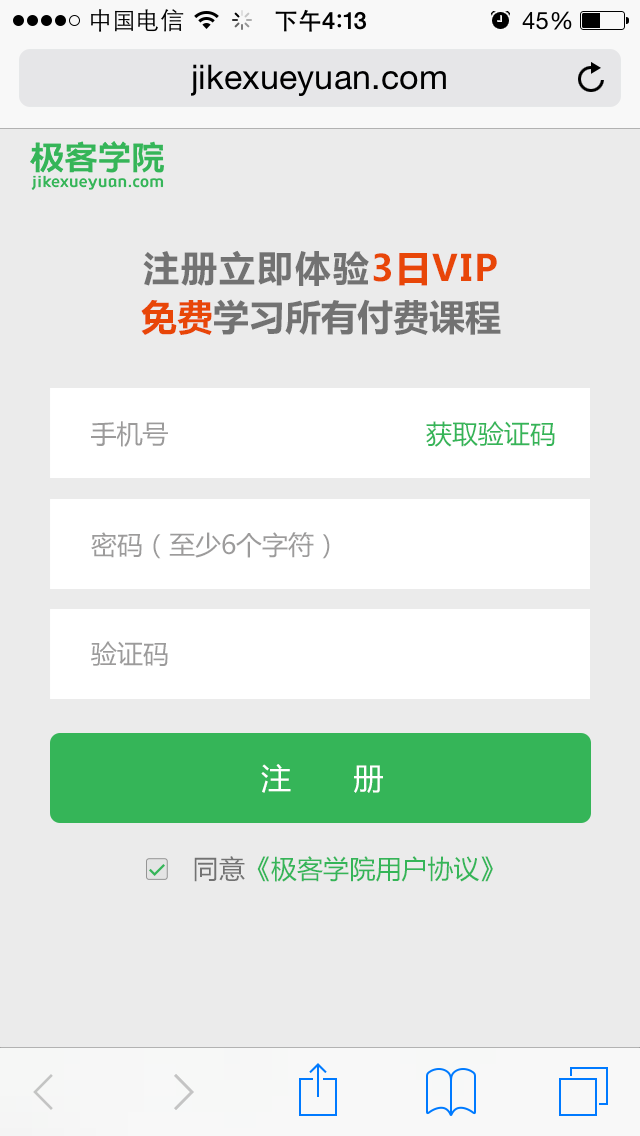
<style>
.page{position:relative;width:640px;height:1136px;background:#ebebeb}
.page>*{position:absolute;margin:0}
.t1{font:36px/49px "MicrosoftYaHei-Bold";color:#727272}
.t2{font:36px/49px "MicrosoftYaHei-Bold";letter-spacing:0.051em;color:#727272}
.t3{font:36px/49px "MicrosoftYaHei-Bold";letter-spacing:0.051em;color:#e84608}
.t4{font:36px/49px "MicrosoftYaHei-Bold";color:#e84608}
.t5{font:26px "MicrosoftYaHei";color:#9c9b9b}
.t6{font:26px "MicrosoftYaHei";color:#35b558}
.t7{font:30px "MicrosoftYaHei";color:#ffffff}
.t8{font:26px "MicrosoftYaHei";color:#727272}
</style>
<div class="page">
<p class="t1" style="left:141px;top:250px;width:360px;height:85px;text-align:center"><span class="t2">注册立即体验</span><span class="t3">3日VIP<br></span><span class="t4">免费</span>学习所有付费课程</p>
<p class="t5" style="left:91px;top:421px;width:77px;height:26px">手机号</p>
<p class="t6" style="left:426px;top:421px;width:129px;height:26px">获取验证码</p>
<p class="t5" style="left:91px;top:532px;width:239px;height:27px">密码（至少6个字符）</p>
<p class="t5" style="left:91px;top:641px;width:77px;height:25px">验证码</p>
<p class="t7" style="left:261px;top:764px;width:122px;height:29px">注       册</p>
<p class="t6" style="left:194px;top:856px;width:299px;height:26px"><span class="t8">同意</span>《极客学院用户协议》</p>
</div>
